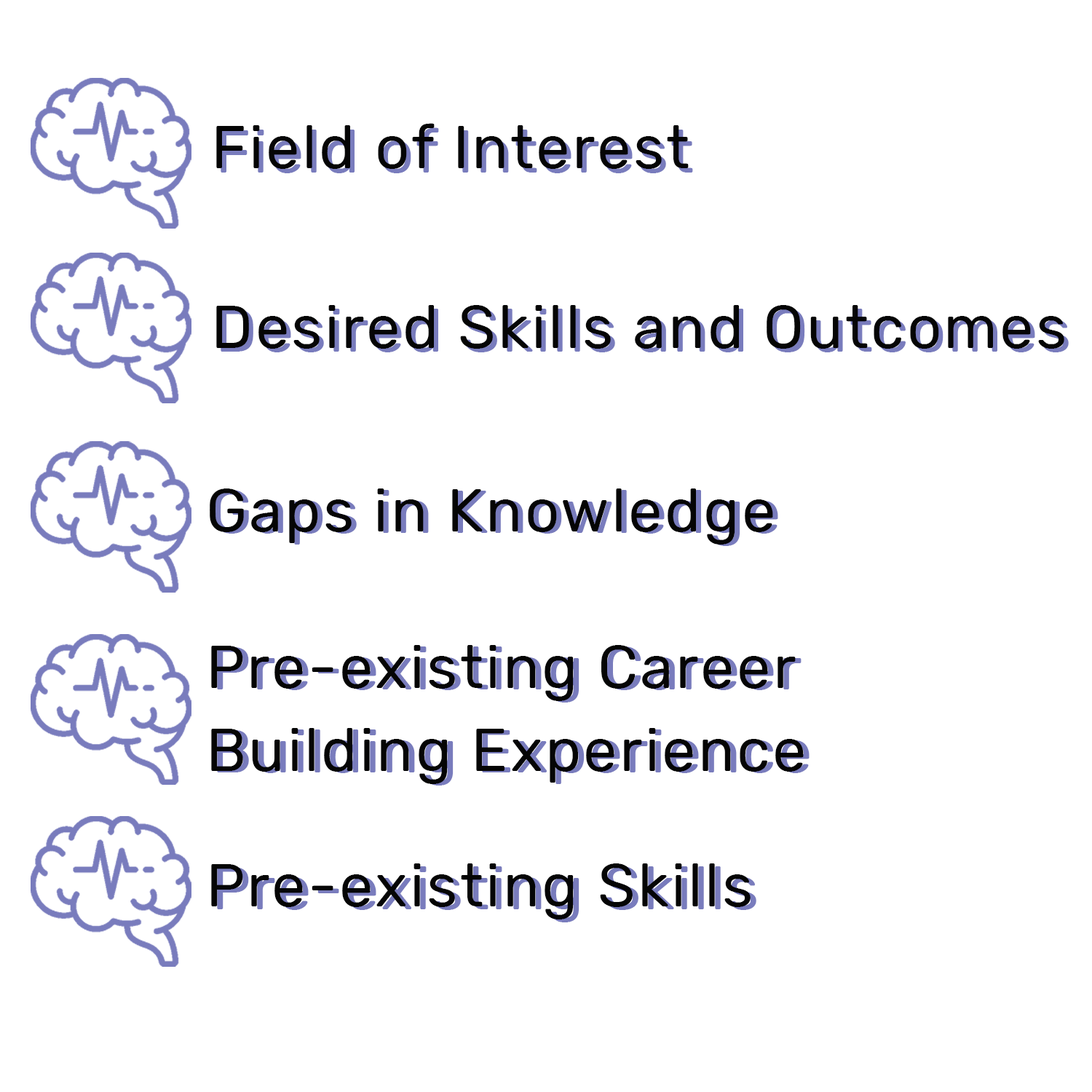
<style>
.page{position:relative;width:1092px;height:1092px;background:#ffffff}
.page>*{position:absolute;margin:0}
.t1{font:60.6px "Rubik-Regular";letter-spacing:0.04em;color:#050505}
.t2{font:60.6px "Rubik-Regular";letter-spacing:0.04em;color:#797cbd}
.t3{font:60.6px/75.7px "Rubik-Regular";letter-spacing:0.04em;color:#050505}
.t4{font:60.6px/75.7px "Rubik-Regular";letter-spacing:0.04em;color:#797cbd}
</style>
<div class="page">
<p class="t1" style="left:216px;top:123px;width:473px;height:46px">Field of Interest</p>
<p class="t2" style="left:221px;top:127px;width:472px;height:46px">Field of Interest</p>
<p class="t1" style="left:216px;top:305px;width:848px;height:44px">Desired Skills and Outcomes</p>
<p class="t2" style="left:221px;top:309px;width:848px;height:43px">Desired Skills and Outcomes</p>
<p class="t1" style="left:210px;top:488px;width:563px;height:57px">Gaps in Knowledge</p>
<p class="t2" style="left:215px;top:490px;width:563px;height:56px">Gaps in Knowledge</p>
<p class="t3" style="left:211px;top:645px;width:593px;height:139px">Pre-existing Career <br>Building Experience</p>
<p class="t4" style="left:217px;top:646px;width:593px;height:140px">Pre-existing Career <br>Building Experience</p>
<p class="t1" style="left:211px;top:863px;width:540px;height:56px">Pre-existing Skills</p>
<p class="t2" style="left:217px;top:866px;width:539px;height:56px">Pre-existing Skills</p>
</div>
